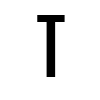
<style>
.page{position:relative;width:100px;height:100px;background:#ffffff}
.page>*{position:absolute;margin:0}
.t1{font:100px "TwCenMT-Condensed";color:#000000}
</style>
<div class="page">
<p class="t1" style="left:37px;top:15px;width:28px;height:62px">T</p>
</div>
